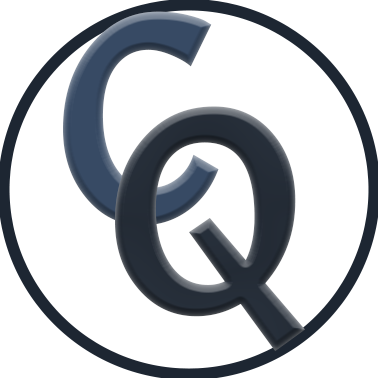
<style>
.page{position:relative;width:378px;height:378px;background:#ffffff}
.page>*{position:absolute;margin:0}
.t1{font:300px "Acme-Regular";color:#374a64}
.t2{font:295.3px "Acme-Regular";color:#2a333f}
</style>
<div class="page">
<p class="t1" style="left:63px;top:11px;width:156px;height:215px">C</p>
<p class="t2" style="left:115px;top:106px;width:190px;height:246px">Q</p>
</div>
